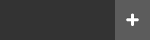
<style>
.page{position:relative;width:150px;height:40px;background:#333333}
.page>*{position:absolute;margin:0}
.t1{font:22px "HelveticaRoundedLT-Black";letter-spacing:-0.04em;color:#ffffff}
</style>
<div class="page">
<p class="t1" style="left:126px;top:13px;width:13px;height:13px">+</p>
</div>
